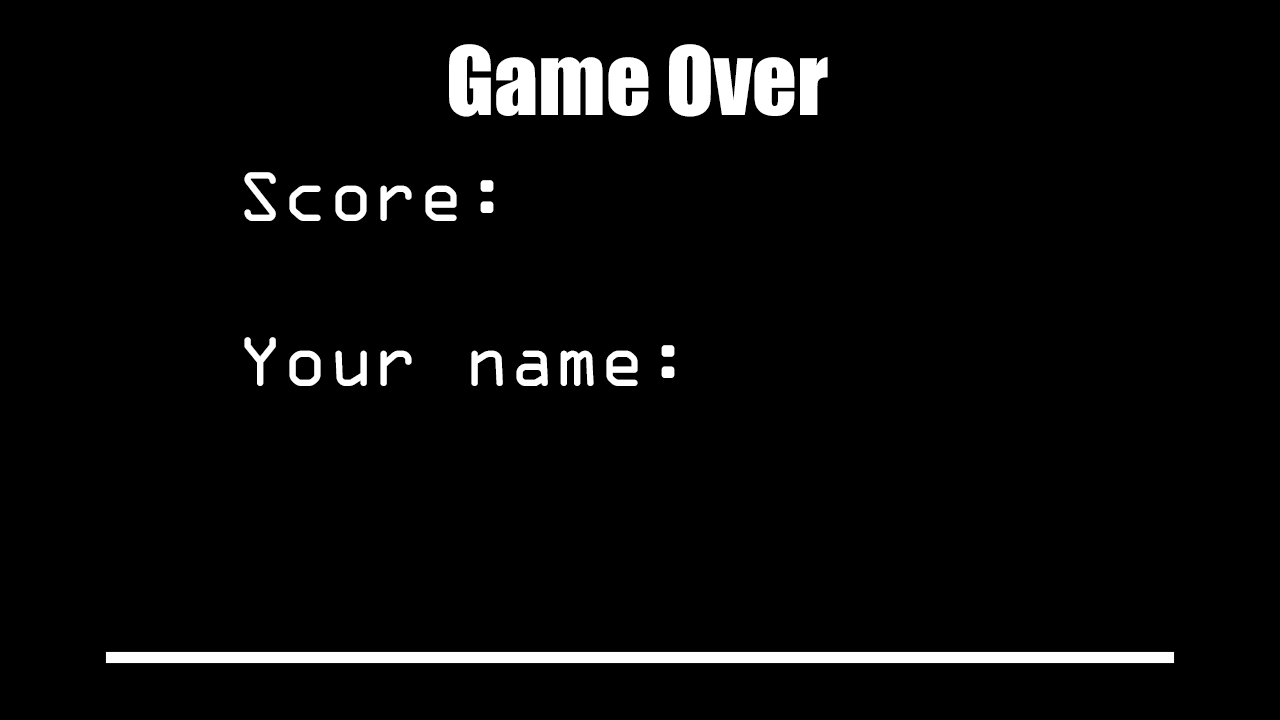
<style>
.page{position:relative;width:1280px;height:720px;background:#000000}
.page>*{position:absolute;margin:0}
.t1{font:87.5px "Impact";color:#ffffff}
.t2{font:75px "OCRAExtended";color:#ffffff}
</style>
<div class="page">
<p class="t1" style="left:449px;top:44px;width:379px;height:73px">Game Over</p>
<p class="t2" style="left:244px;top:172px;width:250px;height:49px">Score:</p>
<p class="t2" style="left:244px;top:337px;width:431px;height:49px">Your name:</p>
</div>
